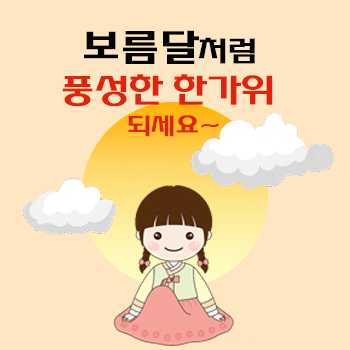
<style>
.page{position:relative;width:350px;height:350px;background:#fde6c1}
.page>*{position:absolute;margin:0}
.t1{font:40px "HYsupB";letter-spacing:-0.03em;color:#030303}
.t2{font:30px "HYsupB";letter-spacing:-0.03em;color:#030303}
.t3{font:35px/41px "HYsupB";letter-spacing:-0.03em;color:#e0240c}
.t4{font:25px/41px "HYsupB";letter-spacing:-0.03em;color:#e0240c}
</style>
<div class="page">
<p class="t1" style="left:84px;top:30px;width:171px;height:34px">보름달<span class="t2">처럼</span></p>
<p class="t3" style="left:62px;top:74px;width:211px;height:63px;text-align:center">풍성한 한가위 <br><span class="t4">되세요~</span></p>
</div>
